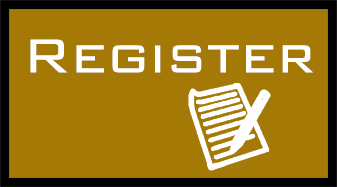
<style>
.page{position:relative;width:337px;height:187px;background:#a47905}
.page>*{position:absolute;margin:0}
.t1{font:63.3px "BankGothic-Light";color:#ffffff}
</style>
<div class="page">
<p class="t1" style="left:30px;top:39px;width:283px;height:34px">Register</p>
</div>
